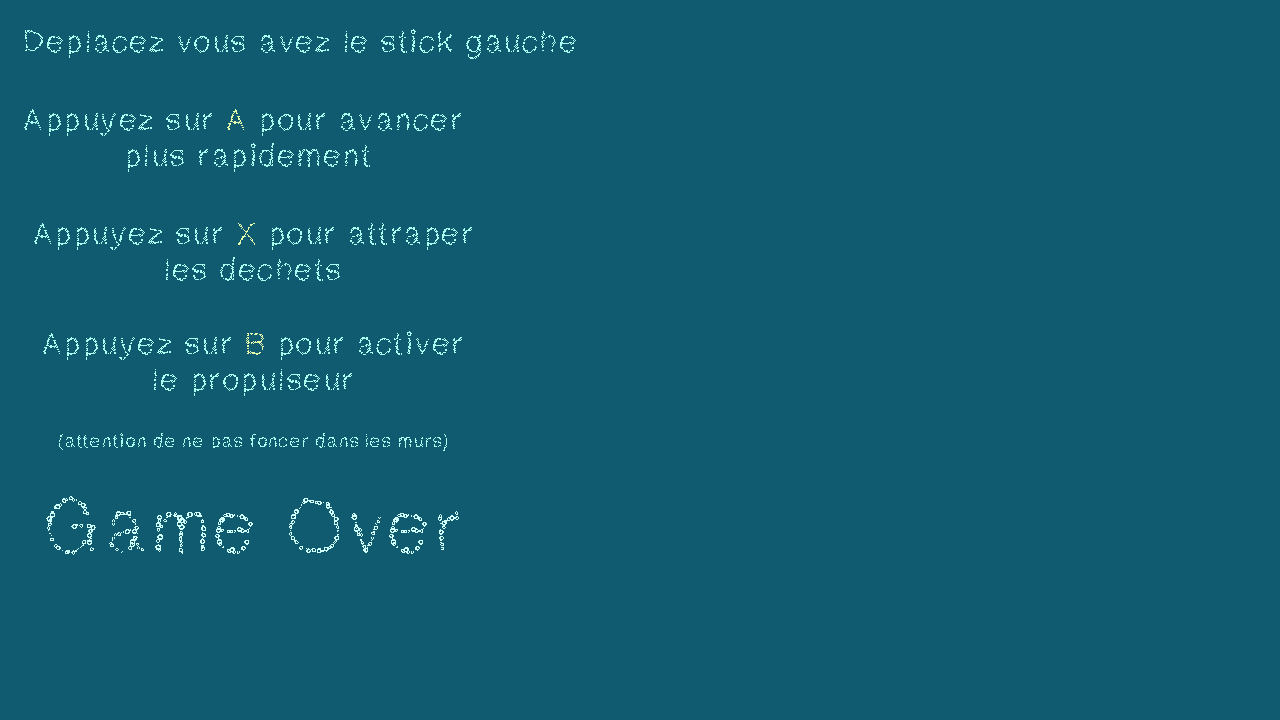
<style>
.page{position:relative;width:1280px;height:720px;background:#105b70}
.page>*{position:absolute;margin:0}
.t1{font:30px "MGbubblebath";letter-spacing:0.05em;color:#aafff0}
.t2{font:30px "MGbubblebath";letter-spacing:0.05em;color:#e4ffac}
.t3{font:18px "MGbubblebath";letter-spacing:0.05em;color:#aafff0}
.t4{font:72px "MGbubblebath";letter-spacing:0.05em;color:#d1fff9}
</style>
<div class="page">
<p class="t1" style="left:25px;top:29px;width:551px;height:30px">Deplacez vous avez le stick gauche</p>
<p class="t1" style="left:24px;top:109px;width:437px;height:63px;text-align:center">Appuyez sur <span class="t2">A</span> pour avancer<br> plus rapidement</p>
<p class="t1" style="left:34px;top:223px;width:438px;height:58px;text-align:center">Appuyez sur <span class="t2">X</span> pour attraper les dechets</p>
<p class="t3" style="left:43px;top:331px;width:419px;height:120px;text-align:center"><span class="t1">Appuyez sur </span><span class="t2">B</span><span class="t1"> pour activer le propulseur<br><br></span>(attention de ne pas foncer dans les murs)</p>
<p class="t4" style="left:46px;top:496px;width:413px;height:59px">Game Over</p>
</div>
